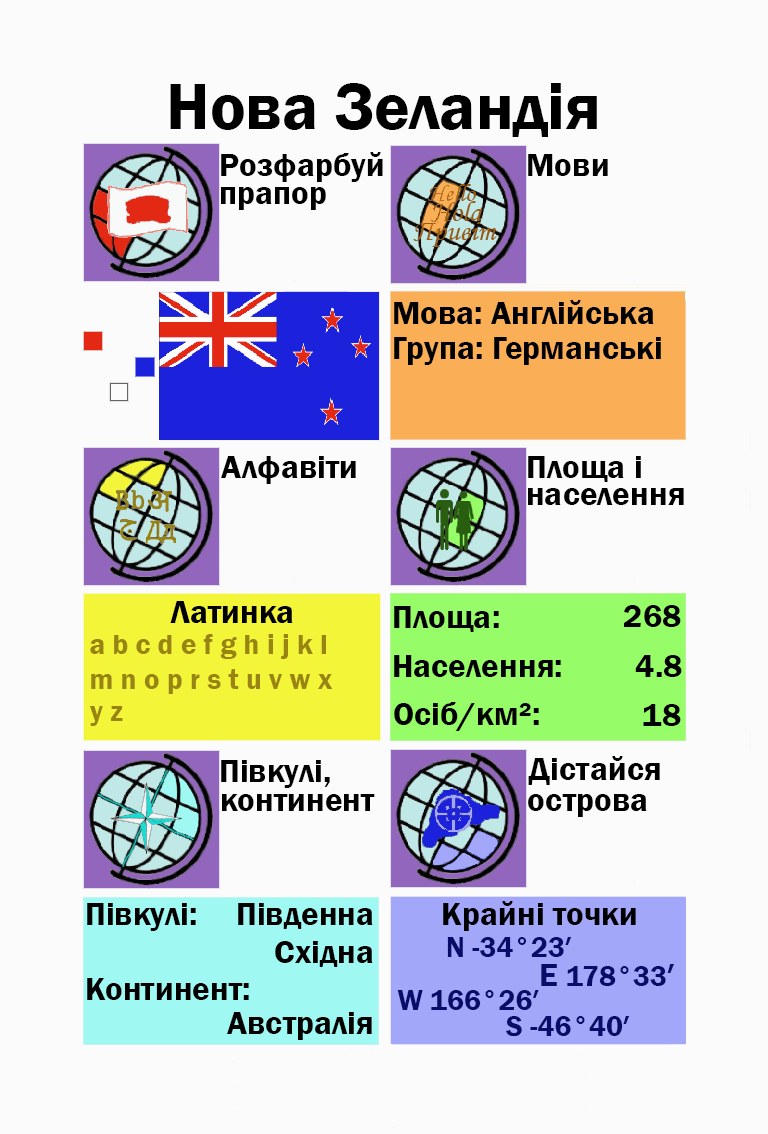
<style>
.page{position:relative;width:768px;height:1134px;background:#fbfbfb}
.page>*{position:absolute;margin:0}
.t1{font:66.7px "FranklinGothic-Demi";color:#000000}
.t2{font:33.3px "FranklinGothic-Demi";color:#000000}
.t3{font:33.3px "FranklinGothic-Demi";color:#000003}
.t4{font:29.2px "FranklinGothic-Demi";color:#988413}
.t5{font:29.2px "FranklinGothic-Demi";color:#090c69}
.t6{font:33.3px "FranklinGothic-Demi";color:#090c69}
</style>
<div class="page">
<p class="t1" style="left:170px;top:83px;width:427px;height:54px">Нова Зеландія</p>
<p class="t2" style="left:221px;top:152px;width:162px;height:30px">Розфарбуй</p>
<p class="t2" style="left:528px;top:154px;width:80px;height:22px">Мови</p>
<p class="t2" style="left:221px;top:187px;width:105px;height:23px">прапор</p>
<p class="t2" style="left:394px;top:300px;width:260px;height:24px">Мова: Англійська</p>
<p class="t2" style="left:394px;top:337px;width:267px;height:28px">Група: Германські</p>
<p class="t2" style="left:221px;top:456px;width:135px;height:28px">Алфавіти</p>
<p class="t2" style="left:528px;top:456px;width:113px;height:26px">Площа і</p>
<p class="t2" style="left:528px;top:488px;width:156px;height:17px">населення</p>
<p class="t2" style="left:170px;top:601px;width:123px;height:22px">Латинка</p>
<p class="t2" style="left:394px;top:606px;width:105px;height:26px">Площа:</p>
<p class="t3" style="left:624px;top:605px;width:57px;height:22px">268</p>
<p class="t4" style="left:90px;top:634px;width:236px;height:25px">a b c d e f g h i j k l</p>
<p class="t2" style="left:394px;top:655px;width:167px;height:22px">Населення:</p>
<p class="t2" style="left:635px;top:655px;width:47px;height:22px">4.8</p>
<p class="t4" style="left:91px;top:669px;width:242px;height:25px">m n o p r s t u v w x</p>
<p class="t2" style="left:394px;top:702px;width:145px;height:29px">Осіб/км²:</p>
<p class="t4" style="left:89px;top:706px;width:34px;height:20px">y z</p>
<p class="t2" style="left:643px;top:704px;width:38px;height:22px">18</p>
<p class="t2" style="left:221px;top:760px;width:109px;height:28px">Півкулі,</p>
<p class="t2" style="left:528px;top:756px;width:132px;height:29px">Дістайся</p>
<p class="t2" style="left:222px;top:794px;width:153px;height:17px">континент</p>
<p class="t2" style="left:528px;top:794px;width:119px;height:23px">острова</p>
<p class="t2" style="left:87px;top:903px;width:109px;height:28px">Півкулі:</p>
<p class="t2" style="left:238px;top:903px;width:135px;height:26px">Південна</p>
<p class="t3" style="left:443px;top:901px;width:193px;height:30px">Крайні точки</p>
<p class="t2" style="left:275px;top:941px;width:98px;height:26px">Східна</p>
<p class="t5" style="left:447px;top:937px;width:125px;height:20px">N -34°23′</p>
<p class="t5" style="left:541px;top:964px;width:133px;height:22px"><span class="t6">E </span>178°33<span class="t6">′</span></p>
<p class="t2" style="left:87px;top:978px;width:162px;height:22px">Континент:</p>
<p class="t5" style="left:397px;top:990px;width:142px;height:20px">W 166°26′</p>
<p class="t2" style="left:227px;top:1012px;width:145px;height:28px">Австралія</p>
<p class="t5" style="left:506px;top:1016px;width:124px;height:21px">S -46°40′</p>
</div>
